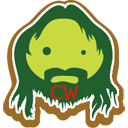
<style>
.page{position:relative;width:128px;height:128px;background:#ffffff}
.page>*{position:absolute;margin:0}
.t1{font:28.7px "LetterGothicStd";letter-spacing:-0.14em;color:#f50808}
</style>
<div class="page">
<p class="t1" style="left:51px;top:85px;width:27px;height:15px">cw</p>
</div>
